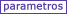
<style>
.page{position:relative;width:67px;height:14px;background:#ffffff}
.page>*{position:absolute;margin:0}
.t1{font:10px "Verdana";color:#553da1;font-weight:bold}
</style>
<div class="page">
<p class="t1" style="left:4px;top:2px;width:59px;height:10px">parametros</p>
</div>
